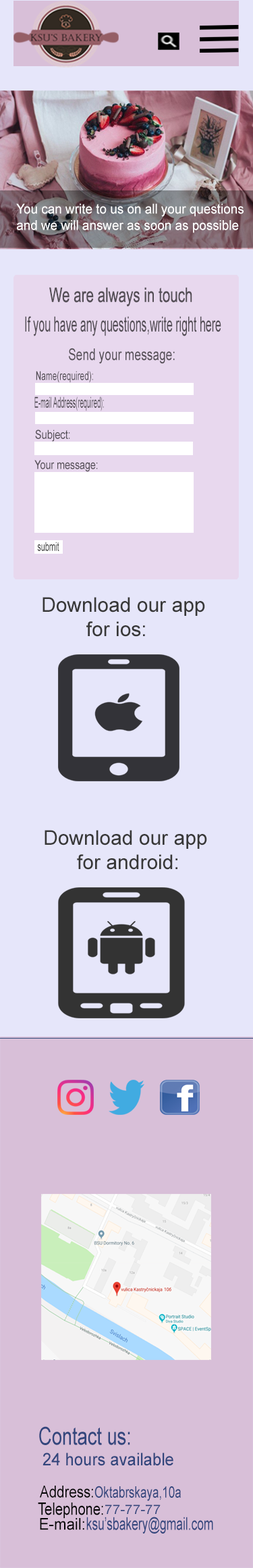
<style>
.page{position:relative;width:253px;height:1568px;background:#e6e6fa}
.page>*{position:absolute;margin:0}
.t1{font:13.6px "ArialMT";color:#ffffff;scale:0.94 1}
.t2{font:20.3px "ArialMT";color:#544e56;scale:0.69 1}
.t3{font:21px "ArialMT";color:#544e56;scale:0.52 1}
.t4{font:16.2px "ArialMT";color:#544e56;scale:0.72 1}
.t5{font:12.2px "ArialMT";color:#544e56;scale:0.66 1}
.t6{font:15.1px "ArialMT";color:#544e56;scale:0.41 1}
.t7{font:12.2px "ArialMT";color:#544e56;scale:0.81 1}
.t8{font:12.2px "ArialMT";color:#544e56;scale:0.79 1}
.t9{font:12.2px "ArialMT";color:#383838;scale:0.61 1}
.t10{font:20.3px "ArialMT";color:#383838}
.t11{font:24.8px "ArialMT";color:#33467d;scale:0.74 1}
.t12{font:17.4px "ArialMT";color:#33467d;scale:0.93 1}
.t13{font:16.4px "ArialMT";color:#050505;scale:0.84 1}
.t14{font:15.7px "ArialMT";color:#33467d;scale:0.73 1}
.t15{font:17px "ArialMT";color:#050505;scale:0.8 1}
.t16{font:13px "ArialMT";color:#33467d;scale:1.08 1}
.t17{font:17.6px "ArialMT";color:#33467d;scale:0.67 1}
.t18{font:16.2px "ArialMT";color:#050505;scale:0.93 1}
</style>
<div class="page">
<p class="t1" style="left:16px;top:203px;width:228px;height:30px">You can write to us on all your questions <br>and we will answer as soon as possible</p>
<p class="t2" style="left:49px;top:287px;width:143px;height:20px">We are always in touch</p>
<p class="t3" style="left:25px;top:316px;width:196px;height:20px">If you have any questions,write right here</p>
<p class="t4" style="left:69px;top:348px;width:106px;height:16px">Send your message:</p>
<p class="t5" style="left:36px;top:371px;width:57px;height:12px">Name(required):</p>
<p class="t6" style="left:34px;top:396px;width:70px;height:15px">E-mail Address(required):</p>
<p class="t7" style="left:35px;top:429px;width:35px;height:13px">Subject:</p>
<p class="t8" style="left:34px;top:460px;width:64px;height:12px">Your message:</p>
<p class="t9" style="left:37px;top:542px;width:22px;height:9px">submit</p>
<p class="t10" style="left:43px;top:597px;width:162px;height:40px">Download our app<br>        for ios:</p>
<p class="t10" style="left:45px;top:830px;width:162px;height:40px">Download our app<br>      for android:</p>
<p class="t11" style="left:39px;top:1426px;width:91px;height:19px">Contact us:</p>
<p class="t12" style="left:43px;top:1453px;width:131px;height:13px">24 hours available</p>
<p class="t13" style="left:40px;top:1486px;width:53px;height:12px">Address:</p>
<p class="t14" style="left:95px;top:1486px;width:86px;height:15px">Oktabrskaya,10a</p>
<p class="t15" style="left:38px;top:1502px;width:65px;height:17px">Telephone:</p>
<p class="t16" style="left:105px;top:1505px;width:56px;height:9px">77-77-77</p>
<p class="t17" style="left:86px;top:1517px;width:127px;height:17px">ksu’sbakery@gmail.com</p>
<p class="t18" style="left:40px;top:1518px;width:44px;height:12px">E-mail:</p>
</div>
